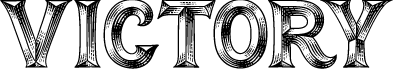
<style>
.page{position:relative;width:393px;height:69px;background:#ffffff}
.page>*{position:absolute;margin:0}
.t1{font:97px "BiteHard";color:#000000;scale:1.03 1}
</style>
<div class="page">
<p class="t1" style="left:0px;top:0px;width:393px;height:69px">VICTORY</p>
</div>
